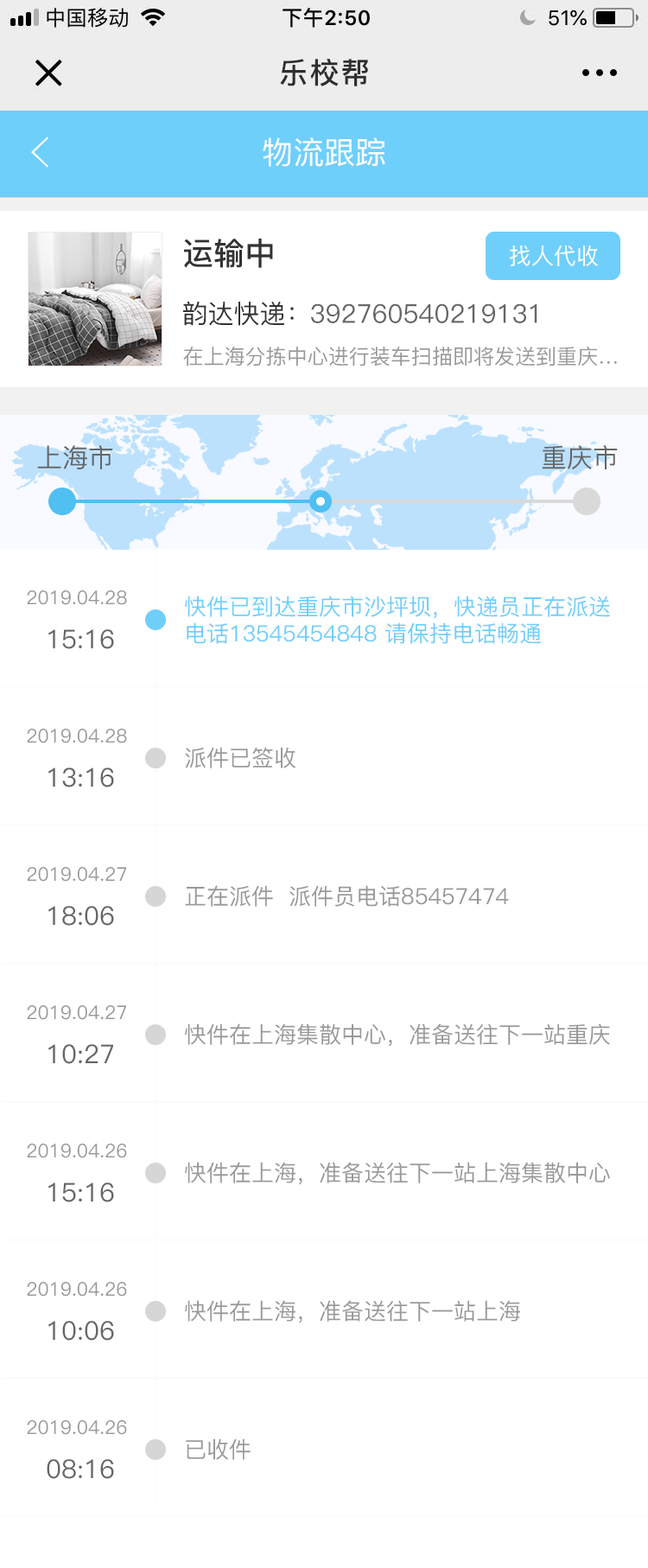
<style>
.page{position:relative;width:648px;height:1568px;background:#ffffff}
.page>*{position:absolute;margin:0}
.t1{font:31.1px "PingFang-SC-Medium";color:#ffffff}
.t2{font:31.1px "PingFang-SC-Bold";color:#333333}
.t3{font:22.5px "PingFang-SC-Medium";color:#ffffff;text-transform:uppercase}
.t4{font:25.9px "PingFang-SC-Medium";color:#333333}
.t5{font:25.9px "PingFang-SC-Medium";color:#666666}
.t6{font:20.7px "PingFang-SC-Medium";color:#999999}
.t7{font:19px "PingFang-SC-Medium";color:#999999}
.t8{font:22.5px "PingFang-SC-Medium";color:#6fcffb}
.t9{font:22.5px "PingFang-SC-Medium";color:#999999}
</style>
<div class="page">
<p class="t1" style="left:263px;top:137px;width:123px;height:30px">物流跟踪</p>
<p class="t2" style="left:184px;top:239px;width:89px;height:29px">运输中</p>
<p class="t3" style="left:510px;top:245px;width:88px;height:21px">找人代收</p>
<p class="t4" style="left:183px;top:301px;width:111px;height:25px">韵达快递：</p>
<p class="t5" style="left:311px;top:303px;width:227px;height:20px">392760540219131</p>
<p class="t6" style="left:183px;top:347px;width:434px;height:20px">在上海分拣中心进行装车扫描即将发送到重庆…</p>
<p class="t5" style="left:37px;top:445px;width:76px;height:24px">上海市</p>
<p class="t5" style="left:542px;top:445px;width:76px;height:25px">重庆市</p>
<p class="t7" style="left:27px;top:590px;width:100px;height:15px">2019.04.28</p>
<p class="t8" style="left:185px;top:596px;width:425px;height:48px">快件已到达重庆市沙坪坝，快递员正在派送<br>电话13545454848 请保持电话畅通</p>
<p class="t5" style="left:48px;top:629px;width:66px;height:20px">15:16</p>
<p class="t7" style="left:27px;top:729px;width:100px;height:14px">2019.04.28</p>
<p class="t9" style="left:185px;top:747px;width:111px;height:21px">派件已签收</p>
<p class="t5" style="left:48px;top:768px;width:66px;height:19px">13:16</p>
<p class="t7" style="left:27px;top:867px;width:99px;height:15px">2019.04.27</p>
<p class="t9" style="left:185px;top:885px;width:324px;height:22px">正在派件  派件员电话85457474</p>
<p class="t5" style="left:48px;top:906px;width:66px;height:20px">18:06</p>
<p class="t7" style="left:27px;top:1005px;width:99px;height:15px">2019.04.27</p>
<p class="t9" style="left:185px;top:1023px;width:425px;height:24px">快件在上海集散中心，准备送往下一站重庆</p>
<p class="t5" style="left:48px;top:1044px;width:65px;height:20px">10:27</p>
<p class="t7" style="left:27px;top:1144px;width:100px;height:14px">2019.04.26</p>
<p class="t9" style="left:185px;top:1162px;width:425px;height:23px">快件在上海，准备送往下一站上海集散中心</p>
<p class="t5" style="left:48px;top:1182px;width:66px;height:20px">15:16</p>
<p class="t7" style="left:27px;top:1282px;width:100px;height:15px">2019.04.26</p>
<p class="t9" style="left:185px;top:1300px;width:335px;height:23px">快件在上海，准备送往下一站上海</p>
<p class="t5" style="left:48px;top:1321px;width:66px;height:20px">10:06</p>
<p class="t7" style="left:27px;top:1420px;width:100px;height:15px">2019.04.26</p>
<p class="t9" style="left:186px;top:1438px;width:65px;height:22px">已收件</p>
<p class="t5" style="left:47px;top:1459px;width:67px;height:20px">08:16</p>
</div>
